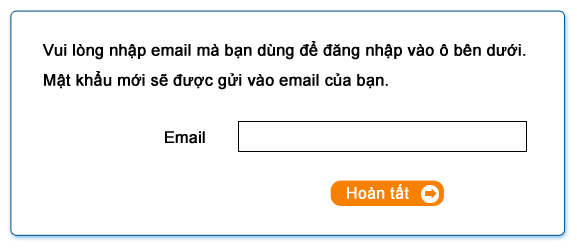
<style>
.page{position:relative;width:577px;height:248px;background:#ffffff}
.page>*{position:absolute;margin:0}
.t1{font:16px/30px "ArialMT";color:#000000;font-weight:bold}
.t2{font:16px "ArialMT";color:#000000;font-weight:bold}
.t3{font:16px "ArialMT";color:#ffffff;font-weight:bold}
</style>
<div class="page">
<p class="t1" style="left:42px;top:41px;width:484px;height:49px">Vui lòng nhập email mà bạn dùng để đăng nhập vào ô bên dưới.<br>Mật khẩu mới sẽ được gửi vào email của bạn.</p>
<p class="t2" style="left:165px;top:131px;width:40px;height:13px">Email</p>
<p class="t3" style="left:347px;top:184px;width:62px;height:15px">Hoàn tất</p>
</div>
